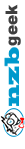
<style>
.page{position:relative;width:25px;height:149px;background:#ffffff}
.page>*{position:absolute;margin:0}
.t1{font:16.2px "Arial-Black";color:#3e3e3e;scale:0.95 1}
</style>
<div class="page">
<p class="t1" style="left:5px;top:4px;width:16px;height:42px;rotate:-90deg">geek</p>
</div>
